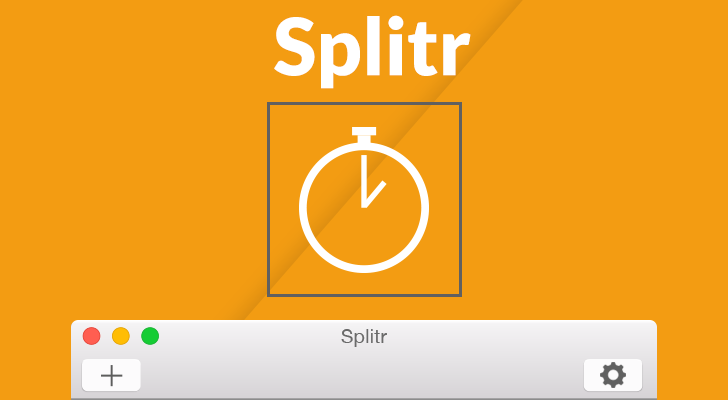
<style>
.page{position:relative;width:728px;height:400px;background:#f39c12}
.page>*{position:absolute;margin:0}
.t1{font:79px "Lato-Black";color:#ffffff}
</style>
<div class="page">
<p class="t1" style="left:274px;top:15px;width:197px;height:74px">Splitr</p>
</div>
